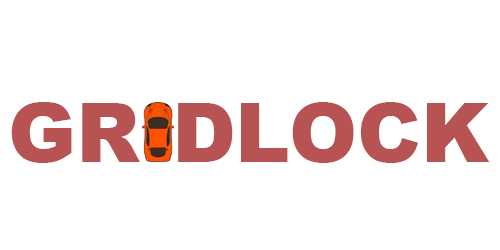
<style>
.page{position:relative;width:500px;height:250px;background:#ffffff}
.page>*{position:absolute;margin:0}
.t1{font:82px "Arial-Black";color:#b85353}
</style>
<div class="page">
<p class="t1" style="left:11px;top:102px;width:479px;height:61px">GRIDLOCK</p>
</div>
